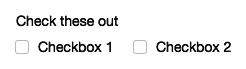
<style>
.page{position:relative;width:246px;height:69px;background:#ffffff}
.page>*{position:absolute;margin:0}
.t1{font:12px "MyriadPro-Regular";color:#0a0a0a}
</style>
<div class="page">
<p class="t1" style="left:16px;top:15px;width:103px;height:12px">Check these out</p>
<p class="t1" style="left:38px;top:41px;width:73px;height:12px">Checkbox 1</p>
<p class="t1" style="left:156px;top:41px;width:75px;height:12px">Checkbox 2</p>
</div>
